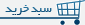
<style>
.page{position:relative;width:85px;height:25px;background:#f1f2f2}
.page>*{position:absolute;margin:0}
.t1{font:12.9px "BYekan";color:#11537e}
</style>
<div class="page">
<p class="t1" style="left:5px;top:5px;width:47px;height:10px">سبد خرید</p>
</div>
